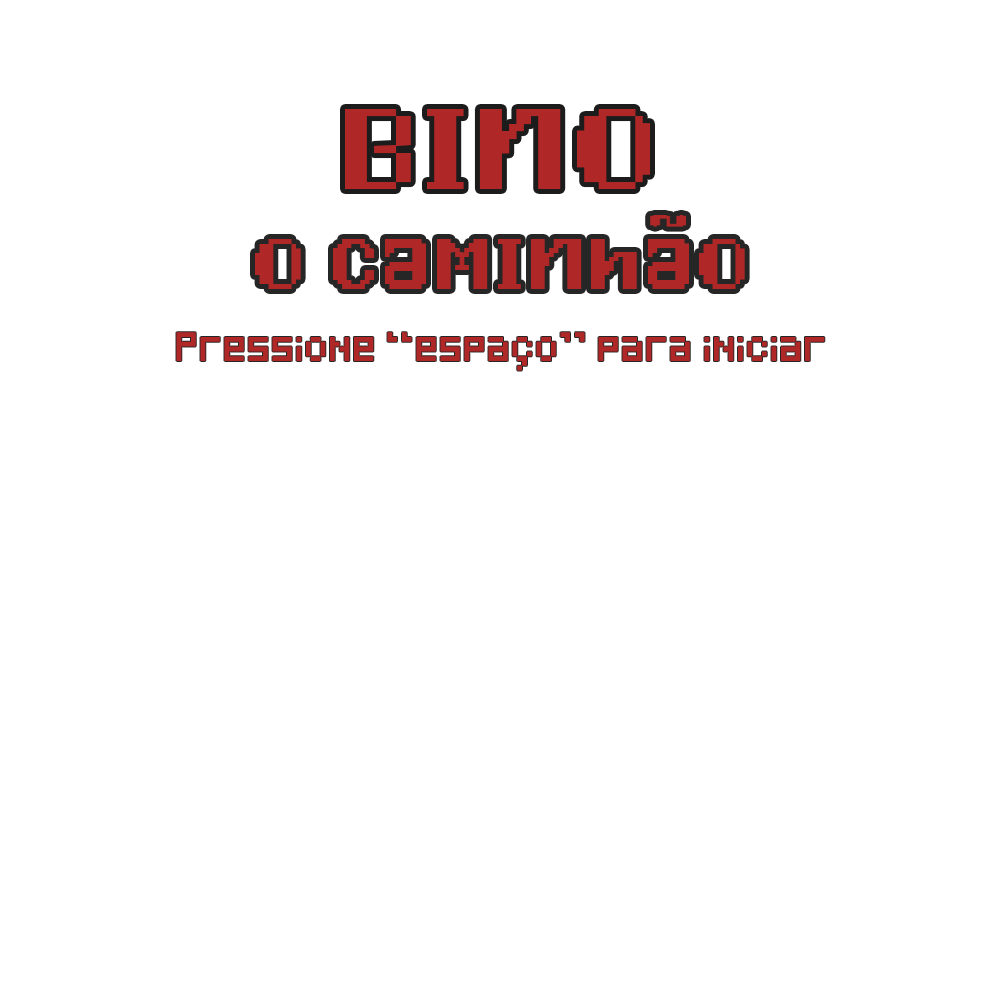
<style>
.page{position:relative;width:1000px;height:1000px;background:#ffffff}
.page>*{position:absolute;margin:0}
.t1{font:120px "Pixelfy";letter-spacing:0.1em;color:#b02727}
.t2{font:75px "Pixelfy";letter-spacing:0.1em;color:#b02727}
.t3{font:24px "Pixeled";color:#b02727}
</style>
<div class="page">
<p class="t1" style="left:345px;top:109px;width:305px;height:80px">Bino</p>
<p class="t2" style="left:255px;top:239px;width:490px;height:50px">o caminhao</p>
<p class="t3" style="left:176px;top:332px;width:649px;height:39px">Pressione “espaço” para iniciar</p>
</div>
